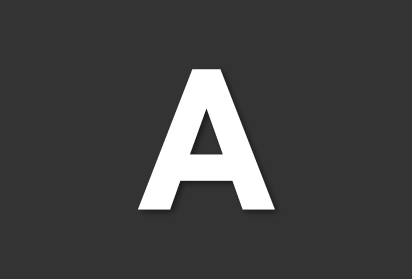
<style>
.page{position:relative;width:412px;height:279px;background:#333333}
.page>*{position:absolute;margin:0}
.t1{font:208.3px "JohnstonITCStd-Bold";color:#ffffff}
</style>
<div class="page">
<p class="t1" style="left:138px;top:69px;width:137px;height:141px">A</p>
</div>
